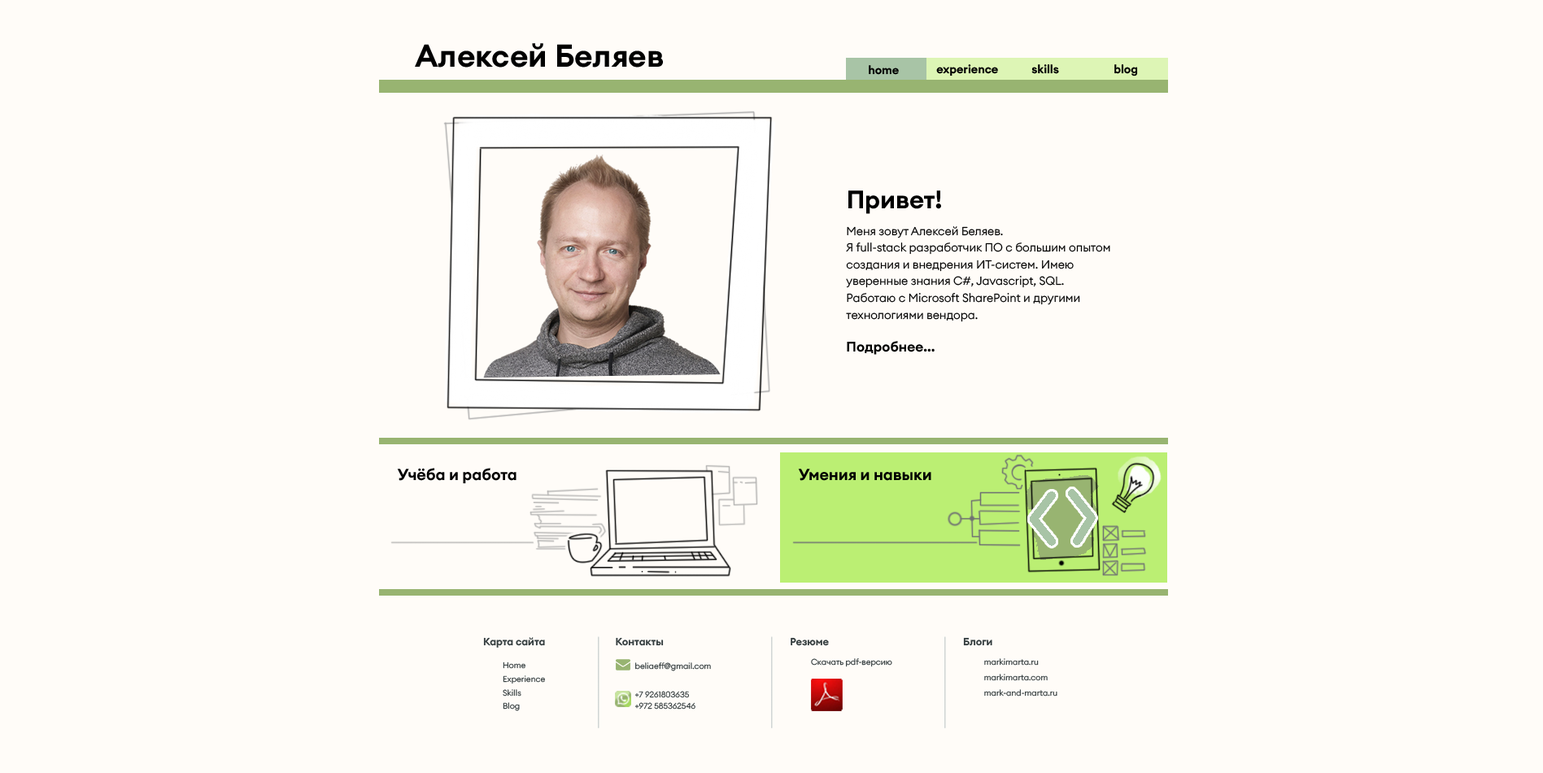
<style>
.page{position:relative;width:1543px;height:773px;background:#fffcf8}
.page>*{position:absolute;margin:0}
.t1{font:31.2px "EuclidCircularA-SemiBold";color:#000000}
.t2{font:11.5px "EuclidCircularA-SemiBold";color:#000000}
.t3{font:24.9px "EuclidCircularA-SemiBold";color:#000000}
.t4{font:11.5px/16.8px "EuclidCircularA-Light";color:#000000}
.t5{font:13.8px "EuclidCircularA-SemiBold";color:#000000}
.t6{font:15.8px "EuclidCircularA-SemiBold";color:#000000}
.t7{font:10.3px "EuclidCircularA-SemiBold";color:#343d3f}
.t8{font:8.2px/13.5px "EuclidCircularA-Light";color:#343d3f}
.t9{font:8.2px/11.1px "EuclidCircularA-Light";color:#343d3f}
.t10{font:8.2px/8.7px "EuclidCircularA-Light";color:#343d3f}
.t11{font:8.2px/6.1px "EuclidCircularA-Light";color:#343d3f}
.t12{font:8.2px "EuclidCircularA-Light";color:#343d3f}
.t13{font:8.2px/15.4px "EuclidCircularA-Light";color:#343d3f}
</style>
<div class="page">
<p class="t1" style="left:415px;top:43px;width:248px;height:25px">Алексей Беляев</p>
<p class="t2" style="left:869px;top:65px;width:30px;height:10px">home</p>
<p class="t2" style="left:936px;top:64px;width:62px;height:12px">experience</p>
<p class="t2" style="left:1031px;top:64px;width:28px;height:10px">skills</p>
<p class="t2" style="left:1114px;top:64px;width:24px;height:12px">blog</p>
<p class="t3" style="left:848px;top:190px;width:93px;height:24px">Привет!</p>
<p class="t4" style="left:846px;top:226px;width:264px;height:96px">Меня зовут Алексей Беляев.<br>Я full-stack разработчик ПО с большим опытом создания и внедрения ИТ-систем. Имею уверенные знания C#, Javascript, SQL.<br>Работаю с Microsoft SharePoint и другими технологиями вендора.<br>Опыт работы - более 10 лет.</p>
<p class="t5" style="left:847px;top:341px;width:88px;height:14px">Подробнее...</p>
<p class="t6" style="left:397px;top:468px;width:120px;height:15px">Учёба и работа</p>
<p class="t6" style="left:798px;top:469px;width:133px;height:12px">Умения и навыки</p>
<p class="t6" style="left:798px;top:469px;width:133px;height:12px">Умения и навыки</p>
<p class="t7" style="left:483px;top:637px;width:62px;height:10px">Карта сайта</p>
<p class="t7" style="left:616px;top:637px;width:48px;height:9px">Контакты</p>
<p class="t7" style="left:791px;top:637px;width:38px;height:9px">Резюме</p>
<p class="t7" style="left:963px;top:637px;width:29px;height:9px">Блоги</p>
<p class="t8" style="left:503px;top:661px;width:42px;height:50px">Home<br>Experience<br>Skills<br>Blog</p>
<p class="t9" style="left:634px;top:662px;width:77px;height:47px">beliaeff@gmail.com<br><span class="t10"><br><br>+7 9</span><span class="t11">261</span>803635 <br>+972 585362546</p>
<p class="t12" style="left:811px;top:658px;width:81px;height:9px">Скачать pdf-версию</p>
<p class="t13" style="left:984px;top:658px;width:73px;height:38px">markimarta.ru<br>markimarta.com<br>mark-and-marta.ru</p>
</div>
